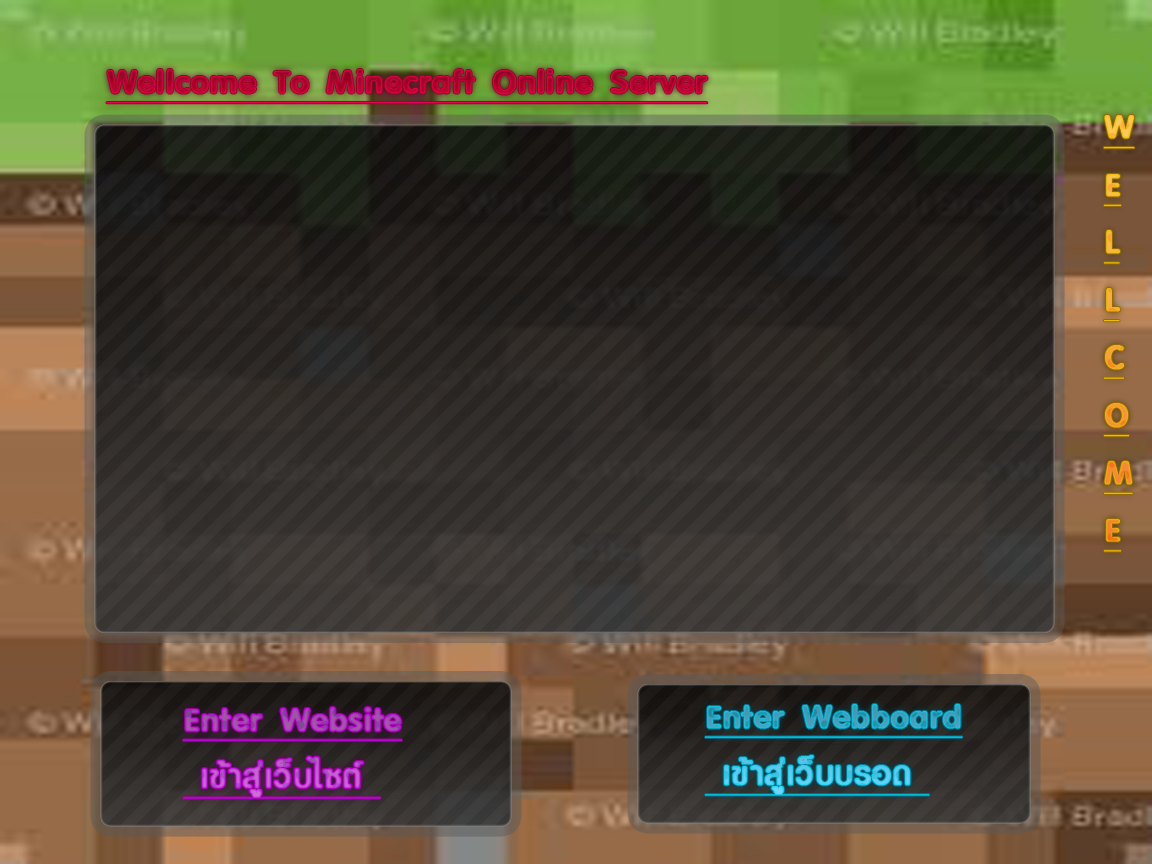
<style>
.page{position:relative;width:1152px;height:864px}
.page>*{position:absolute;margin:0}
.t1{font:48px "PSL-Omyim";font-weight:bold;text-decoration:underline}
</style>
<div class="page">
<p class="t1" style="left:106px;top:69px;width:602px;height:35px">Wellcome To Minecraft Online Server</p>
<p class="t1" style="left:1104px;top:115px;width:31px;height:437px">W<br>E<br>L<br>L<br>C<br>O<br>M<br>E</p>
<p class="t1" style="left:183px;top:707px;width:219px;height:92px">Enter Website<br> เข้าสู่เว็บไซต์</p>
<p class="t1" style="left:705px;top:704px;width:258px;height:92px">Enter Webboard<br> เข้าสู่เว็บบรอด</p>
</div>
